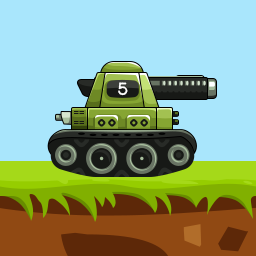
<style>
.page{position:relative;width:256px;height:256px;background:#a9e6fc}
.page>*{position:absolute;margin:0}
.t1{font:6.9px/39.1px "army1";color:#ffffff}
</style>
<div class="page">
<p class="t1" style="left:118px;top:82px;width:10px;height:14px">5</p>
</div>
